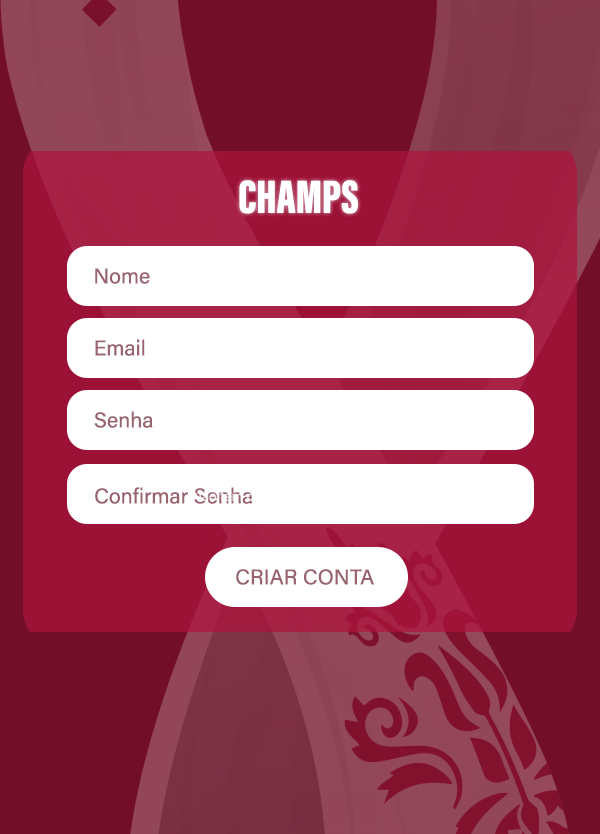
<style>
.page{position:relative;width:600px;height:834px;background:#ffffff}
.page>*{position:absolute;margin:0}
.t1{font:48.2px "AcuminConcept-ExtraCondensedBlack";color:#ffffff}
.t2{font:21.4px "AcuminConcept-Regular";color:#99646e}
</style>
<div class="page">
<p class="t1" style="left:239px;top:180px;width:119px;height:34px">CHAMPS</p>
<p class="t2" style="left:95px;top:268px;width:55px;height:16px">Nome</p>
<p class="t2" style="left:95px;top:339px;width:50px;height:17px">Email</p>
<p class="t2" style="left:94px;top:411px;width:59px;height:17px">Senha</p>
<p class="t2" style="left:95px;top:487px;width:157px;height:17px">Confirmar Senha</p>
<p class="t2" style="left:236px;top:569px;width:138px;height:16px">CRIAR CONTA</p>
</div>
